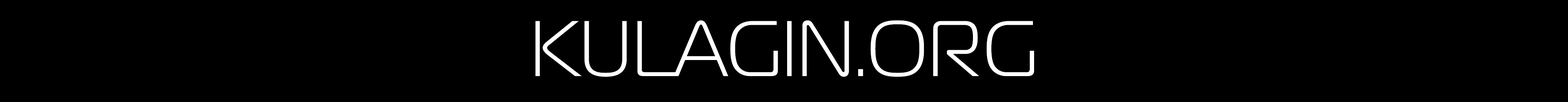
<style>
.page{position:relative;width:1568px;height:102px;background:#000000}
.page>*{position:absolute;margin:0}
.t1{font:78.4px "MagistralC";color:#ffffff}
</style>
<div class="page">
<p class="t1" style="left:535px;top:20px;width:499px;height:57px">KULAGIN.ORG</p>
</div>
